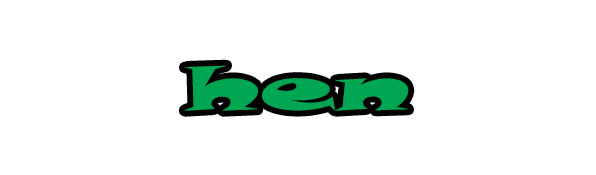
<style>
.page{position:relative;width:596px;height:175px;background:#ffffff}
.page>*{position:absolute;margin:0}
.t1{font:60px "SnapITC-Regular";color:#00a651;scale:2 1}
</style>
<div class="page">
<p class="t1" style="left:184px;top:65px;width:225px;height:46px">hen</p>
</div>
